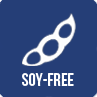
<style>
.page{position:relative;width:97px;height:97px;background:#253e77}
.page>*{position:absolute;margin:0}
.t1{font:18px "BebasNeue";color:#ffffff}
</style>
<div class="page">
<p class="t1" style="left:22px;top:73px;width:52px;height:13px">SOY-FRee</p>
</div>
